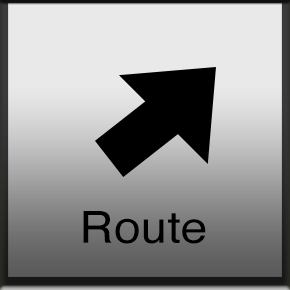
<style>
.page{position:relative;width:290px;height:290px;background:#e9e9e9}
.page>*{position:absolute;margin:0}
.t1{font:44px "Helvetica";color:#000000;scale:1.09 1}
</style>
<div class="page">
<p class="t1" style="left:83px;top:211px;width:123px;height:33px">Route</p>
</div>
